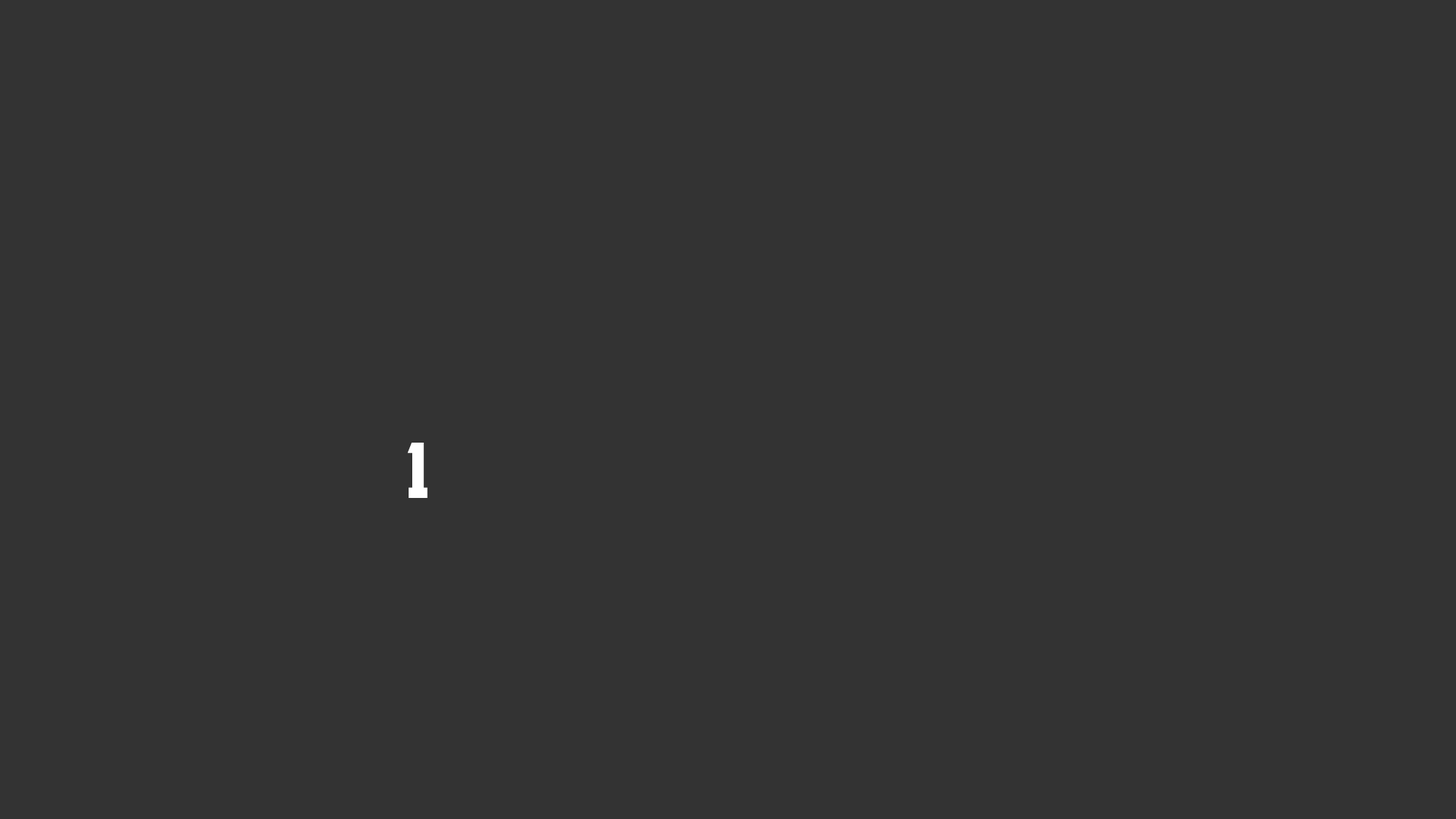
<style>
.page{position:relative;width:1456px;height:819px;background:#333333}
.page>*{position:absolute;margin:0}
.t1{font:75.9px "AmericanCaptain";color:#ffffff}
</style>
<div class="page">
<p class="t1" style="left:407px;top:443px;width:20px;height:55px">1</p>
</div>
